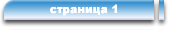
<style>
.page{position:relative;width:170px;height:30px}
.page>*{position:absolute;margin:0}
.t1{font:11px "Arial-Black";color:#ffffff}
</style>
<div class="page">
<p class="t1" style="left:50px;top:4px;width:67px;height:12px">страница 1</p>
</div>
